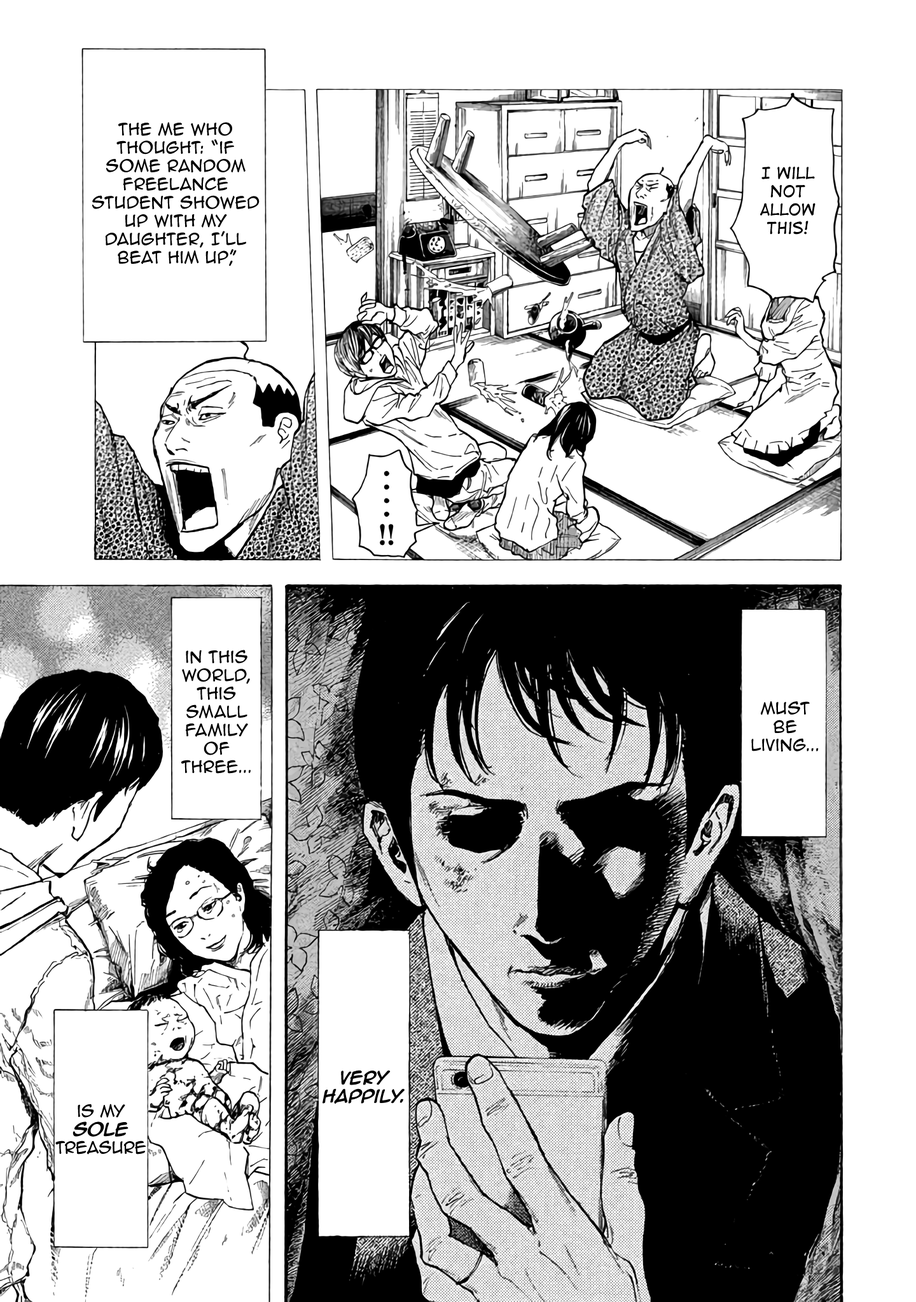
<style>
.page{position:relative;width:916px;height:1302px;background:#ffffff}
.page>*{position:absolute;margin:0}
.t1{font:15.3px "AnimeAce2.0BB";color:#000000}
.t2{font:15.3px "DigitalStrip";color:#000000}
.t3{font:15.3px "AnimeAce2.0BB-Bold";color:#000000}
.t4{font:15.3px "AnimeAce2.0BB";letter-spacing:-0.025em;color:#000000}
.t5{font:15.3px "AnimeAce2.0BB-Bold";letter-spacing:-0.025em;color:#000000}
</style>
<div class="page">
<p class="t1" style="left:92px;top:122px;width:167px;height:144px;text-align:center">The me who thought: “if some random freelance student showed up with my daughter, I’ll beat him up”,</p>
<p class="t2" style="left:760px;top:167px;width:55px;height:68px;text-align:center">I will not allow this!</p>
<p class="t1" style="left:181px;top:650px;width:70px;height:124px;text-align:center">in this world, this small family of three...</p>
<p class="t1" style="left:751px;top:701px;width:67px;height:51px;text-align:center">Must be living...</p>
<p class="t3" style="left:322px;top:1070px;width:82px;height:34px;text-align:center">very Happily.</p>
<p class="t4" style="left:55px;top:1104px;width:91px;height:51px;text-align:center">is my <span class="t5">sole</span> treasure</p>
</div>
